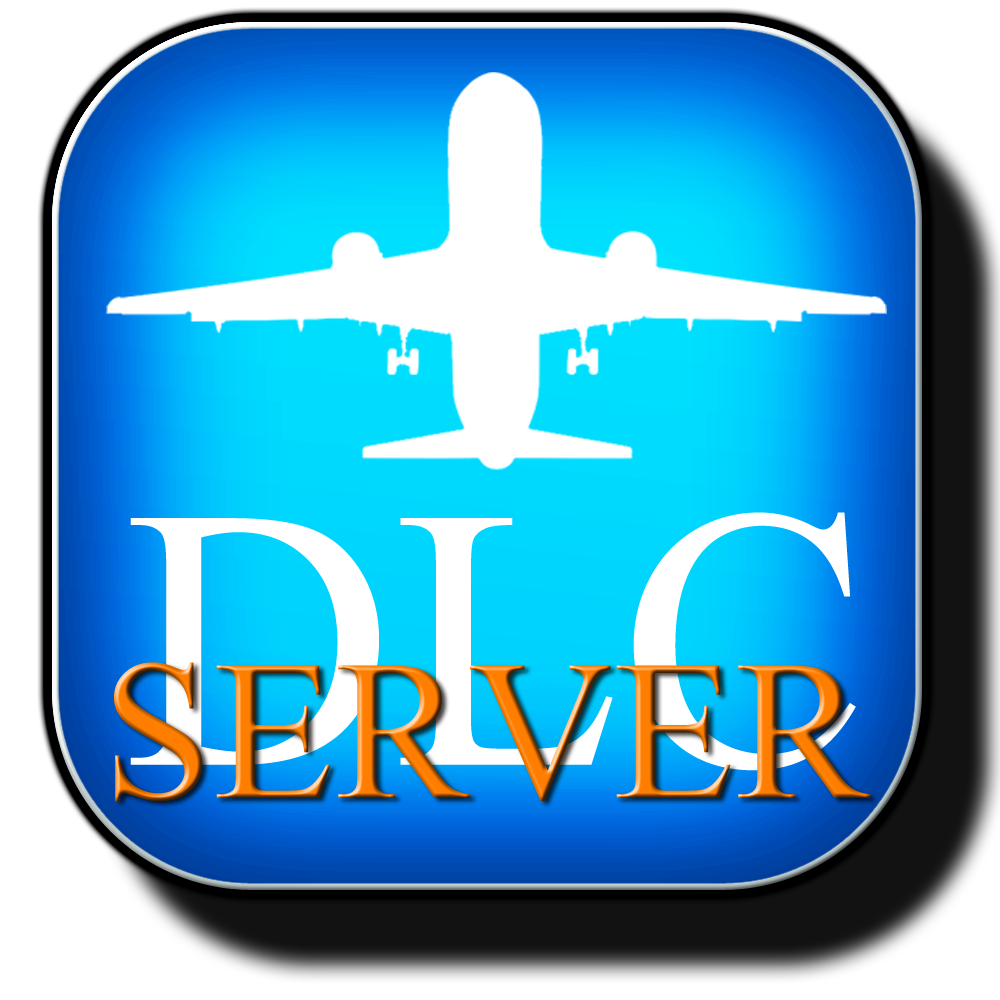
<style>
.page{position:relative;width:1000px;height:1000px;background:#ffffff}
.page>*{position:absolute;margin:0}
.t1{font:372px "TimesNewRomanPSMT";color:#ffffff}
.t2{font:200px "TimesNewRomanPSMT"}
</style>
<div class="page">
<p class="t1" style="left:130px;top:512px;width:726px;height:259px">DLC</p>
<p class="t2" style="left:114px;top:662px;width:757px;height:140px">SERVER</p>
</div>
